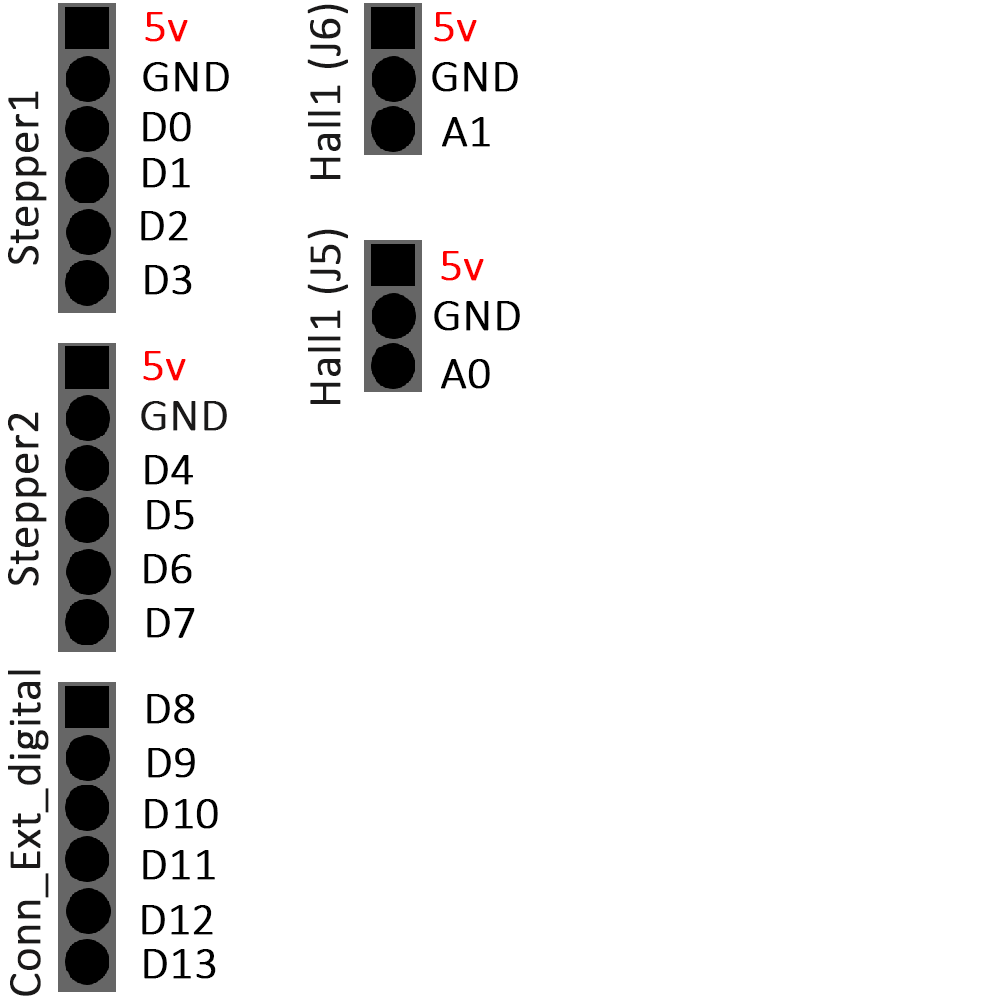
<style>
.page{position:relative;width:1000px;height:1000px;background:#ffffff}
.page>*{position:absolute;margin:0}
.t1{font:46px "Calibri-Light";color:#1a1919;font-weight:bold}
.t2{font:46px "Calibri-Light";color:#ff0000;font-weight:bold}
.t3{font:46px "Calibri-Light";color:#000000;font-weight:bold}
</style>
<div class="page">
<p class="t1" style="left:307px;top:4px;width:41px;height:175px;rotate:-90deg">Hall1 (J6)</p>
<p class="t2" style="left:145px;top:12px;width:43px;height:30px">5v</p>
<p class="t2" style="left:434px;top:12px;width:43px;height:30px">5v</p>
<p class="t3" style="left:143px;top:62px;width:86px;height:30px">GND</p>
<p class="t3" style="left:432px;top:62px;width:86px;height:30px">GND</p>
<p class="t1" style="left:8px;top:91px;width:39px;height:174px;rotate:-90deg">Stepper1</p>
<p class="t3" style="left:143px;top:112px;width:48px;height:30px">D0</p>
<p class="t3" style="left:442px;top:117px;width:48px;height:30px">A1</p>
<p class="t3" style="left:143px;top:158px;width:47px;height:30px">D1</p>
<p class="t3" style="left:141px;top:211px;width:47px;height:30px">D2</p>
<p class="t1" style="left:307px;top:229px;width:41px;height:175px;rotate:-90deg">Hall1 (J5)</p>
<p class="t2" style="left:441px;top:251px;width:43px;height:30px">5v</p>
<p class="t3" style="left:145px;top:265px;width:47px;height:30px">D3</p>
<p class="t3" style="left:434px;top:301px;width:86px;height:30px">GND</p>
<p class="t2" style="left:143px;top:351px;width:43px;height:30px">5v</p>
<p class="t3" style="left:441px;top:359px;width:49px;height:30px">A0</p>
<p class="t1" style="left:141px;top:401px;width:86px;height:30px">GND</p>
<p class="t1" style="left:8px;top:412px;width:39px;height:174px;rotate:-90deg">Stepper2</p>
<p class="t3" style="left:145px;top:455px;width:48px;height:30px">D4</p>
<p class="t3" style="left:147px;top:500px;width:47px;height:30px">D5</p>
<p class="t3" style="left:144px;top:554px;width:48px;height:30px">D6</p>
<p class="t3" style="left:147px;top:608px;width:48px;height:30px">D7</p>
<p class="t1" style="left:8px;top:670px;width:41px;height:326px;rotate:-90deg">Conn_Ext_digital</p>
<p class="t3" style="left:147px;top:694px;width:48px;height:30px">D8</p>
<p class="t3" style="left:148px;top:748px;width:47px;height:30px">D9</p>
<p class="t3" style="left:145px;top:799px;width:73px;height:30px">D10</p>
<p class="t3" style="left:143px;top:850px;width:72px;height:30px">D11</p>
<p class="t3" style="left:142px;top:905px;width:71px;height:30px">D12</p>
<p class="t3" style="left:144px;top:949px;width:72px;height:30px">D13</p>
</div>
